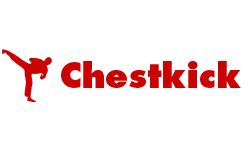
<style>
.page{position:relative;width:250px;height:150px;background:#ffffff}
.page>*{position:absolute;margin:0}
.t1{font:33.4px "Futura-ExtraBold";color:#ca0302}
</style>
<div class="page">
<p class="t1" style="left:61px;top:61px;width:180px;height:27px">Chestkick</p>
</div>
